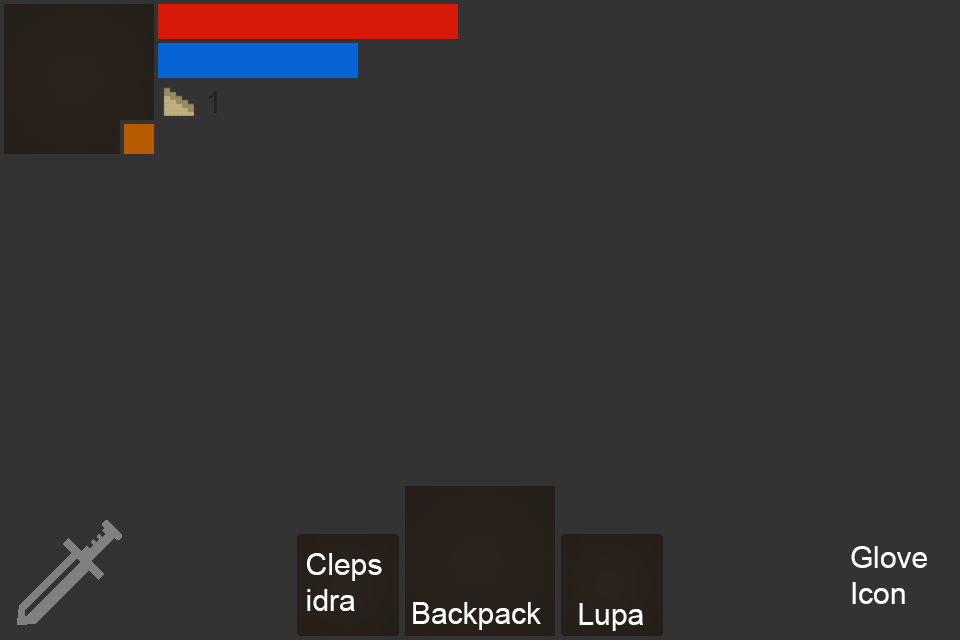
<style>
.page{position:relative;width:960px;height:640px;background:#333333}
.page>*{position:absolute;margin:0}
.t1{font:30px "ArialMT";color:#27201b}
.t2{font:30px "ArialMT";color:#ffffff}
</style>
<div class="page">
<p class="t1" style="left:208px;top:91px;width:9px;height:22px">1</p>
<p class="t2" style="left:307px;top:553px;width:75px;height:58px">Cleps<br>idra</p>
<p class="t2" style="left:851px;top:546px;width:76px;height:58px">Glove<br>Icon</p>
<p class="t2" style="left:413px;top:602px;width:128px;height:28px">Backpack</p>
<p class="t2" style="left:579px;top:603px;width:64px;height:28px">Lupa</p>
</div>
